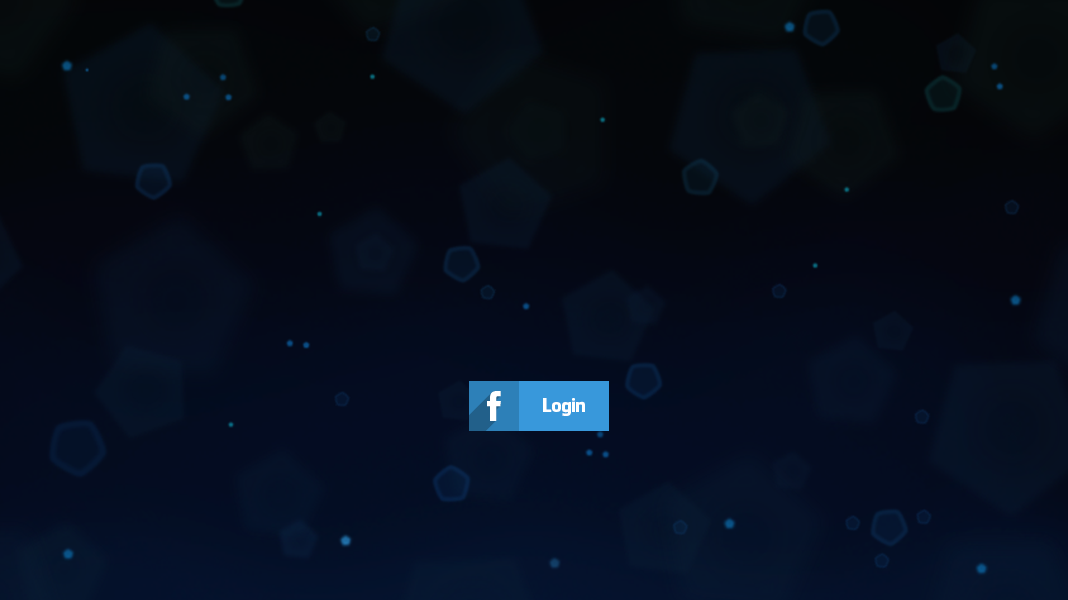
<style>
.page{position:relative;width:1068px;height:600px}
.page>*{position:absolute;margin:0}
.t1{font:18.7px "FacebookLetterFaces";color:#ffffff}
</style>
<div class="page">
<p class="t1" style="left:543px;top:398px;width:42px;height:18px">Login</p>
</div>
